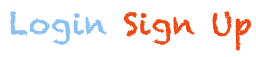
<style>
.page{position:relative;width:256px;height:57px;background:#ffffff}
.page>*{position:absolute;margin:0}
.t1{font:30px "Chalkduster";letter-spacing:0.025em;color:#ec4915}
.t2{font:30px "Chalkduster";letter-spacing:0.025em;color:#8bc0f2}
</style>
<div class="page">
<p class="t1" style="left:10px;top:11px;width:241px;height:40px"><span class="t2">Login </span>Sign Up</p>
</div>
